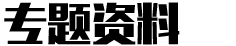
<style>
.page{position:relative;width:236px;height:46px;background:#ffffff}
.page>*{position:absolute;margin:0}
.t1{font:44px "MFLiHei_Noncommercial-Regular";color:#000000}
</style>
<div class="page">
<p class="t1" style="left:4px;top:2px;width:176px;height:43px">专题资料</p>
</div>
